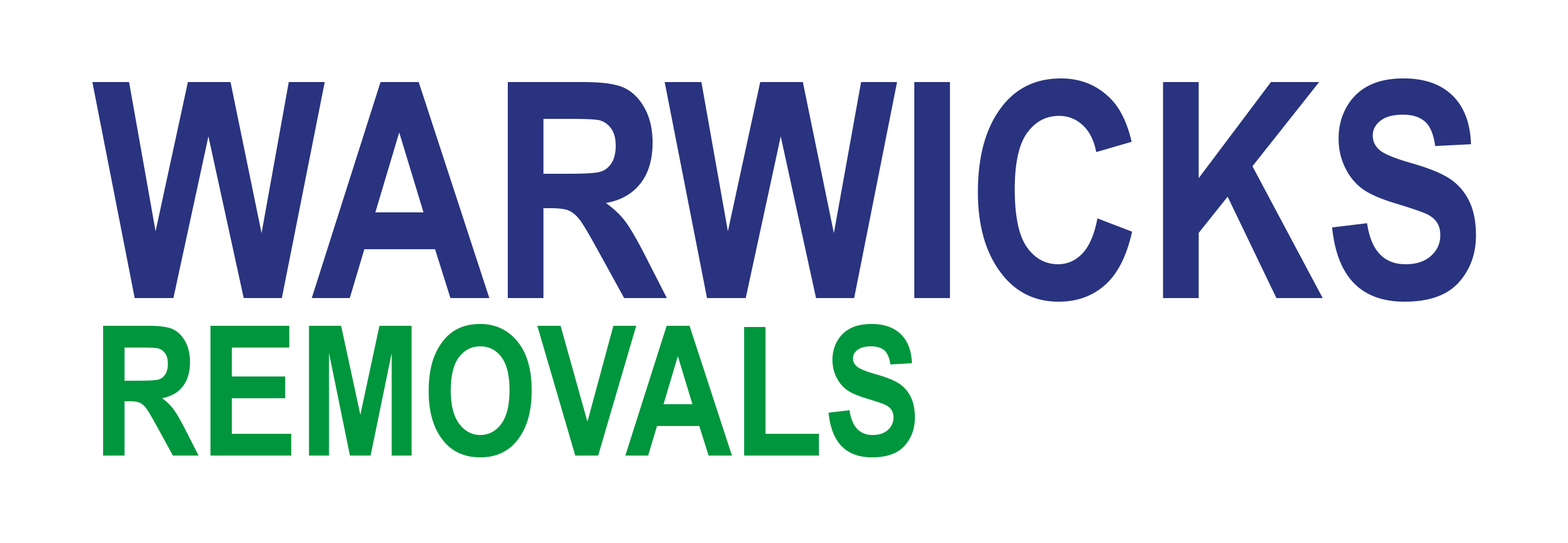
<style>
.page{position:relative;width:1568px;height:543px;background:#ffffff}
.page>*{position:absolute;margin:0}
.t1{font:301.5px "ArialNarrow-Bold";color:#29337f}
.t2{font:180.9px "ArialNarrow-Bold";color:#00963d}
</style>
<div class="page">
<p class="t1" style="left:92px;top:78px;width:1384px;height:224px">WARWICKS</p>
<p class="t2" style="left:103px;top:324px;width:812px;height:133px">REMOVALS</p>
</div>
